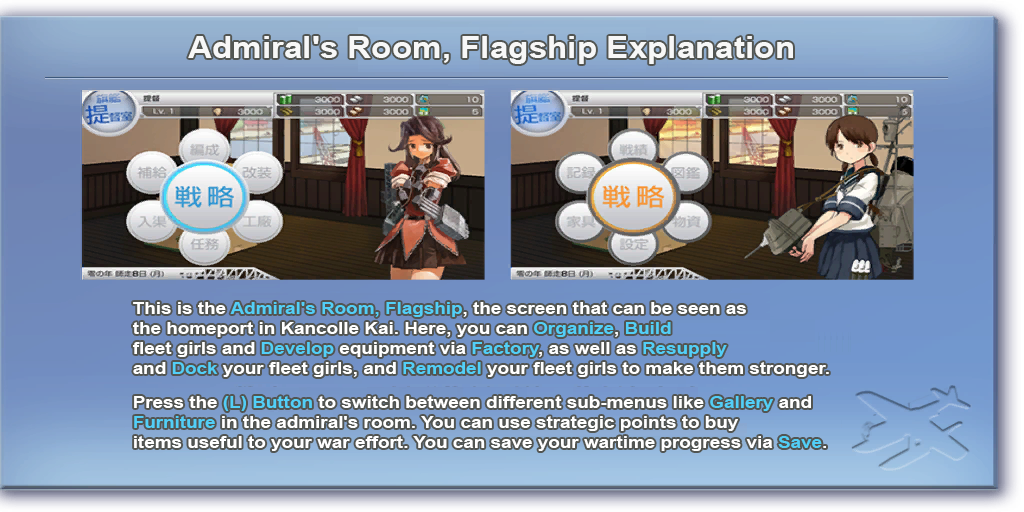
<style>
.page{position:relative;width:1024px;height:512px}
.page>*{position:absolute;margin:0}
.t1{font:30px "Arial-BoldMT";color:#f7f7f7;scale:1.11 1}
.t2{font:17px/20px "Arial-BoldMT";color:#ffffff;scale:1.11 1}
.t3{font:17px/20px "Arial-BoldMT";color:#52cff7;scale:1.11 1}
</style>
<div class="page">
<p class="t1" style="left:188px;top:36px;width:605px;height:28px">Admiral's Room, Flagship Explanation</p>
<p class="t2" style="left:133px;top:302px;width:696px;height:75px">This is the <span class="t3">Admiral's Room, Flagship</span>, the screen that can be seen as <br>the homeport in Kancolle Kai. Here, you can <span class="t3">Organize</span>, <span class="t3">Build</span> <br>fleet girls and <span class="t3">Develop</span> equipment via <span class="t3">Factory</span>, as well as <span class="t3">Resupply</span> <br>and <span class="t3">Dock</span> your fleet girls, and <span class="t3">Remodel</span> your fleet girls to make them stronger.</p>
<p class="t2" style="left:134px;top:396px;width:692px;height:55px">Press the <span class="t3">(L) Button</span> to switch between different sub-menus like <span class="t3">Gallery</span> and <br><span class="t3">Furniture</span> in the admiral's room. You can use strategic points to buy <br>items useful to your war effort. You can save your wartime progress via <span class="t3">Save</span>.</p>
</div>
